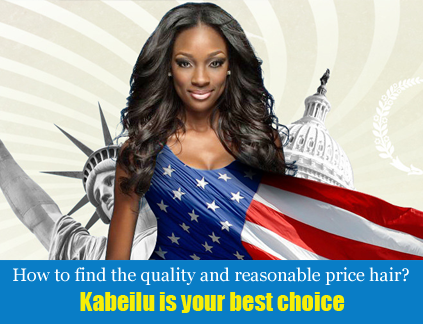
<style>
.page{position:relative;width:423px;height:324px}
.page>*{position:absolute;margin:0}
.t1{font:18px "Georgia";color:#ffffff}
.t2{font:24px "Impact";color:#f7ee06}
</style>
<div class="page">
<p class="t1" style="left:13px;top:267px;width:396px;height:18px">How to find the quality and reasonable price hair?</p>
<p class="t2" style="left:80px;top:292px;width:265px;height:21px">Kabeilu is your best choice</p>
</div>
